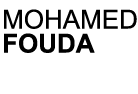
<style>
.page{position:relative;width:138px;height:94px;background:#ffffff}
.page>*{position:absolute;margin:0}
.t1{font:26px/24px "ArialMT";color:#000000}
.t2{font:26px/24px "Arial-BoldMT";color:#000000}
</style>
<div class="page">
<p class="t1" style="left:4px;top:9px;width:133px;height:44px">MOHAMED<br><span class="t2">FOUDA</span></p>
</div>
